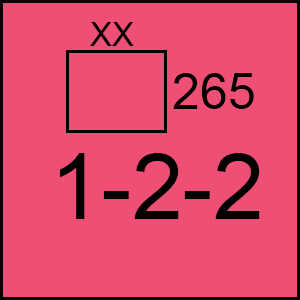
<style>
.page{position:relative;width:300px;height:300px;background:#ee4f74}
.page>*{position:absolute;margin:0}
.t1{font:33.3px "ArialMT";color:#000000}
.t2{font:50px "ArialMT";color:#000000}
.t3{font:91.7px "ArialMT";color:#000000}
</style>
<div class="page">
<p class="t1" style="left:90px;top:22px;width:44px;height:24px">XX</p>
<p class="t2" style="left:173px;top:73px;width:81px;height:36px">265</p>
<p class="t3" style="left:60px;top:153px;width:200px;height:66px">1-2-2</p>
</div>
